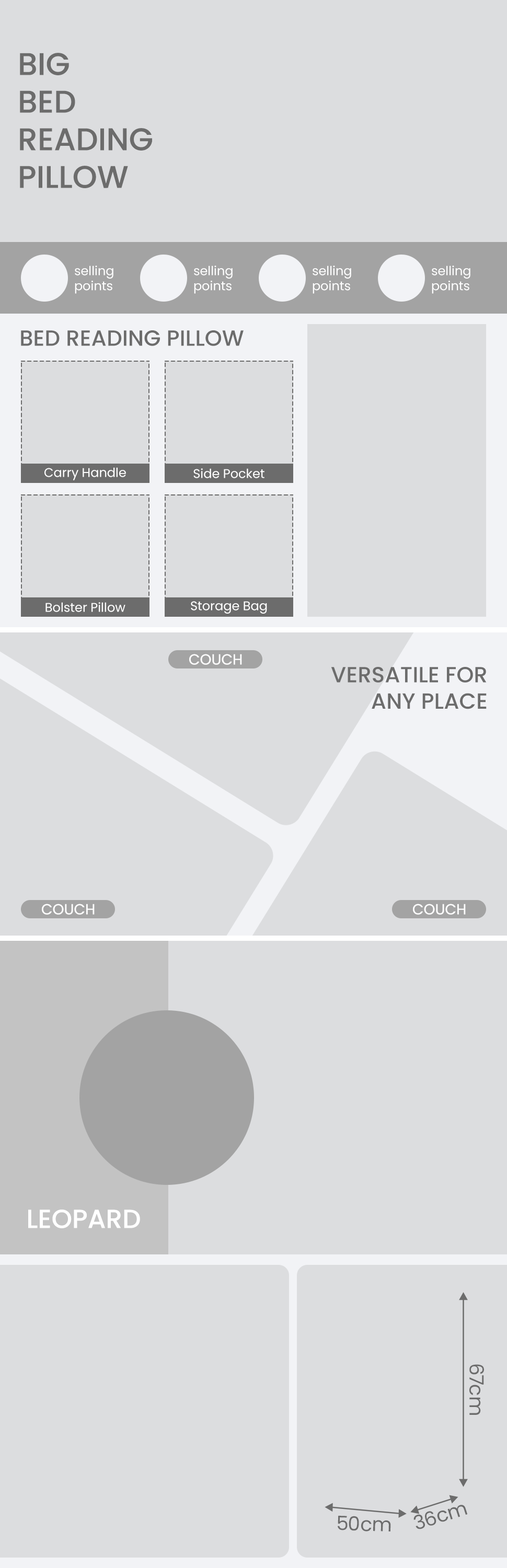
<style>
.page{position:relative;width:507px;height:1568px;background:#dcdddf}
.page>*{position:absolute;margin:0}
.t1{font:31.4px "Poppins-Medium";color:#6c6c6c;text-transform:uppercase}
.t2{font:12.5px "Poppins-Regular";color:#ffffff}
.t3{font:22px "Poppins-Medium";color:#6c6c6c;text-transform:uppercase}
.t4{font:14.6px "Poppins-Regular";color:#ffffff}
.t5{font:26.1px "Poppins-Medium";color:#ffffff;text-transform:uppercase}
.t6{font:19.6px "Poppins-Regular";color:#6c6c6c}
</style>
<div class="page">
<p class="t1" style="left:20px;top:53px;width:132px;height:135px">BIG<br>BED<br>READING<br>PILLOW</p>
<p class="t2" style="left:75px;top:266px;width:38px;height:28px">selling<br>points</p>
<p class="t2" style="left:194px;top:266px;width:39px;height:28px">selling<br>points</p>
<p class="t2" style="left:313px;top:266px;width:38px;height:28px">selling<br>points</p>
<p class="t2" style="left:432px;top:266px;width:38px;height:28px">selling<br>points</p>
<p class="t3" style="left:21px;top:330px;width:223px;height:16px">Bed Reading Pillow</p>
<p class="t2" style="left:44px;top:467px;width:82px;height:13px">Carry Handle</p>
<p class="t2" style="left:193px;top:468px;width:71px;height:10px">Side Pocket</p>
<p class="t2" style="left:45px;top:602px;width:80px;height:10px">Bolster Pillow</p>
<p class="t2" style="left:191px;top:601px;width:76px;height:13px">Storage Bag</p>
<p class="t4" style="left:189px;top:654px;width:53px;height:11px">COUCH</p>
<p class="t3" style="left:331px;top:667px;width:156px;height:42px;text-align:right">VERSATILE for<br>Any Place</p>
<p class="t4" style="left:42px;top:904px;width:53px;height:11px">COUCH</p>
<p class="t4" style="left:413px;top:904px;width:53px;height:11px">COUCH</p>
<p class="t5" style="left:28px;top:1209px;width:112px;height:19px">LEOPARD</p>
<p class="t6" style="left:469px;top:1364px;width:15px;height:51px;rotate:90deg">67cm</p>
<p class="t6" style="left:413px;top:1505px;width:55px;height:24px;rotate:-18deg">36cm</p>
<p class="t6" style="left:338px;top:1516px;width:53px;height:15px;rotate:2deg">50cm</p>
</div>
